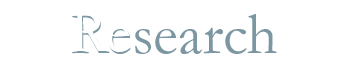
<style>
.page{position:relative;width:360px;height:74px;background:#ffffff}
.page>*{position:absolute;margin:0}
.t1{font:59.8px "Garamond";color:#7c97a1}
</style>
<div class="page">
<p class="t1" style="left:72px;top:14px;width:205px;height:40px">Research</p>
</div>
